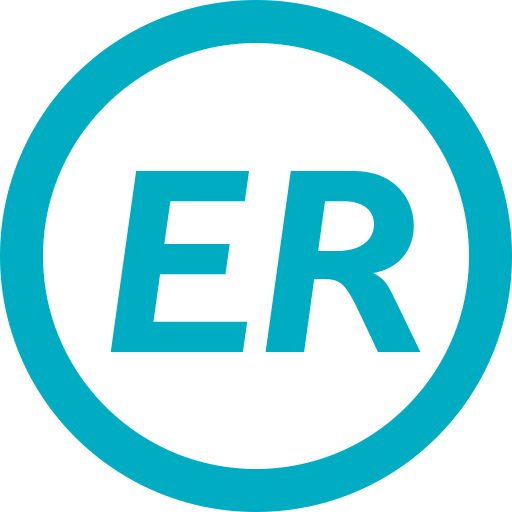
<style>
.page{position:relative;width:512px;height:512px;background:#ffffff}
.page>*{position:absolute;margin:0}
.t1{font:265px "GillSansMTPro-BoldItalic";color:#00acc1}
</style>
<div class="page">
<p class="t1" style="left:110px;top:170px;width:311px;height:182px">ER</p>
</div>
